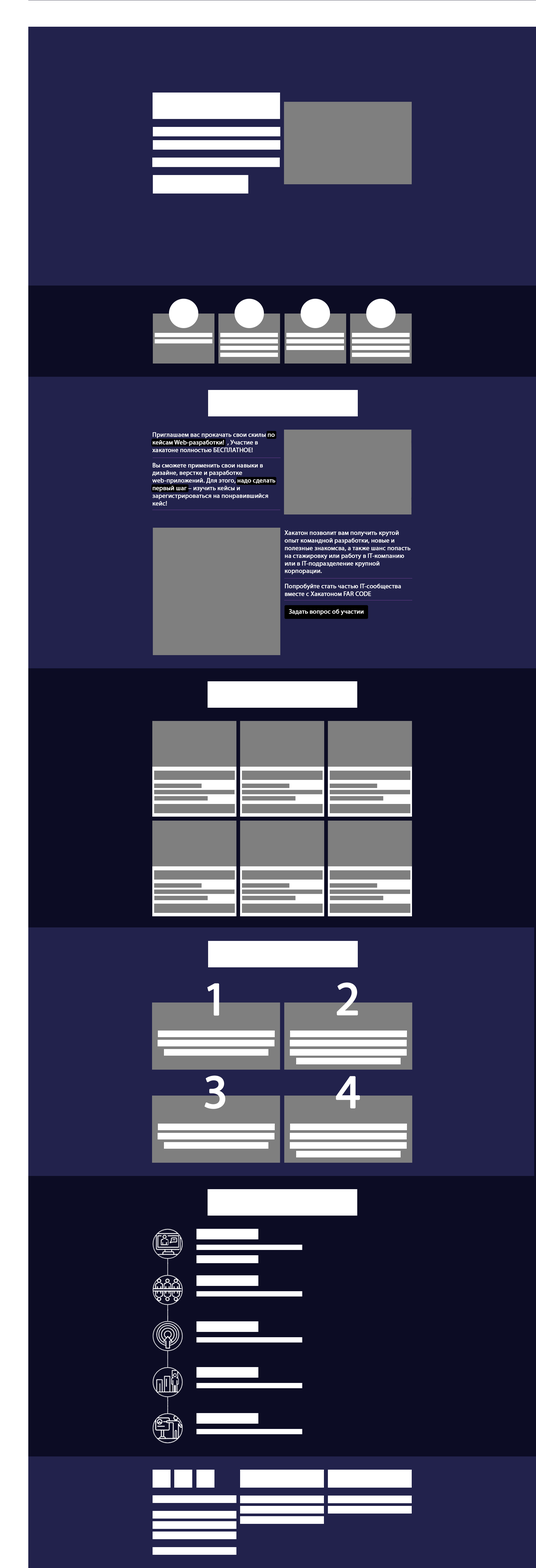
<style>
.page{position:relative;width:536px;height:1568px;background:#22224c}
.page>*{position:absolute;margin:0}
.t1{font:6.3px "MyriadPro-Regular";color:#ffffff;font-weight:bold}
.t2{font:47.6px "MyriadPro-Regular";color:#ffffff;font-weight:bold}
</style>
<div class="page">
<p class="t1" style="left:152px;top:432px;width:123px;height:74px">Приглашаем вас прокачать свои скилы по кейсам Web-разработки!  , Участие в хакатоне полностью БЕСПЛАТНОЕ!<br><br>Вы сможете применить свои навыки в дизайне, верстке и разработке web-приложений. Для этого, надо сделать первый шаг – изучить кейсы и зарегистрироваться на понравившийся кейс!</p>
<p class="t1" style="left:284px;top:530px;width:126px;height:66px">Хакатон позволит вам получить крутой опыт командной разработки, новые и полезные знакомсва, а также шанс попасть на стажировку или работу в IT-компанию или в IT-подразделение крупной корпорации.<br><br>Попробуйте стать частью IT-сообщества вместе с Хакатоном FAR CODE</p>
<p class="t1" style="left:289px;top:609px;width:75px;height:6px">Задать вопрос об участии</p>
<p class="t2" style="left:207px;top:983px;width:12px;height:33px">1</p>
<p class="t2" style="left:337px;top:982px;width:21px;height:33px">2</p>
<p class="t2" style="left:204px;top:1075px;width:21px;height:34px">3</p>
<p class="t2" style="left:336px;top:1076px;width:24px;height:33px">4</p>
</div>
